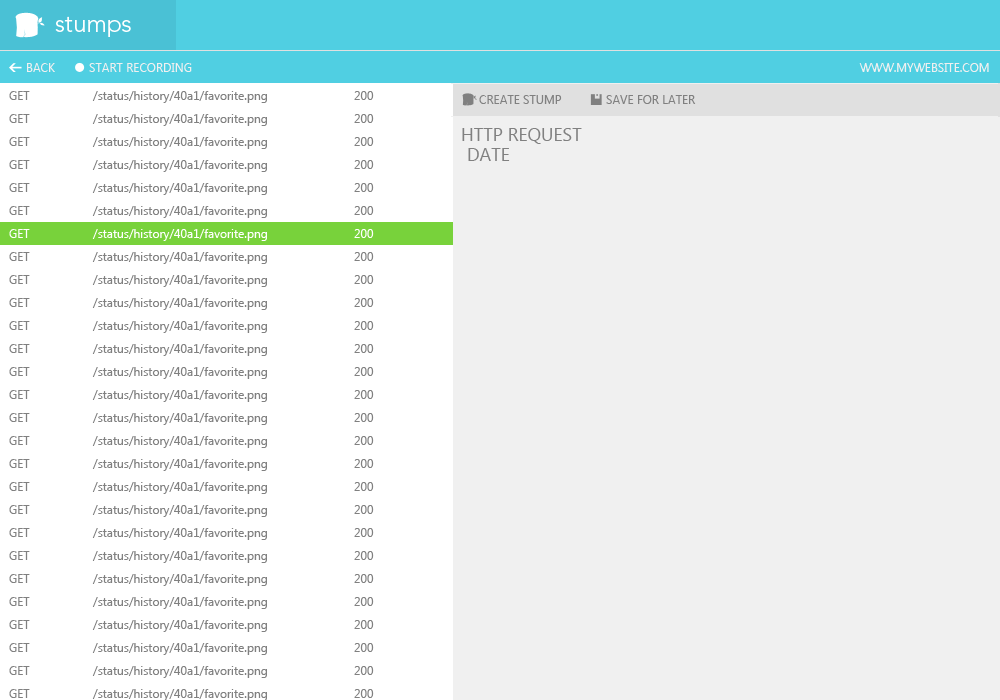
<style>
.page{position:relative;width:1000px;height:700px;background:#f0f0f0}
.page>*{position:absolute;margin:0}
.t1{font:24px "Avenir-Light";color:#ffffff}
.t2{font:12px "SegoeUI";color:#f0f0f0}
.t3{font:12px "SegoeUI";color:#808080}
.t4{font:18px "SegoeUI";color:#808080}
.t5{font:12px "SegoeUI";color:#ffffff}
</style>
<div class="page">
<p class="t1" style="left:55px;top:16px;width:76px;height:21px">stumps</p>
<p class="t2" style="left:27px;top:63px;width:28px;height:9px">BACK</p>
<p class="t2" style="left:89px;top:63px;width:103px;height:9px">START RECORDING</p>
<p class="t2" style="left:859px;top:63px;width:130px;height:9px">WWW.MYWEBSITE.COM</p>
<p class="t3" style="left:9px;top:91px;width:21px;height:9px">GET</p>
<p class="t3" style="left:92px;top:91px;width:175px;height:12px">/status/history/40a1/favorite.png</p>
<p class="t3" style="left:354px;top:91px;width:20px;height:9px">200</p>
<p class="t3" style="left:479px;top:95px;width:83px;height:9px">CREATE STUMP</p>
<p class="t3" style="left:606px;top:95px;width:90px;height:9px">SAVE FOR LATER</p>
<p class="t3" style="left:9px;top:114px;width:21px;height:9px">GET</p>
<p class="t3" style="left:92px;top:114px;width:175px;height:12px">/status/history/40a1/favorite.png</p>
<p class="t3" style="left:354px;top:114px;width:20px;height:9px">200</p>
<p class="t3" style="left:9px;top:137px;width:21px;height:9px">GET</p>
<p class="t3" style="left:92px;top:137px;width:175px;height:12px">/status/history/40a1/favorite.png</p>
<p class="t3" style="left:354px;top:137px;width:20px;height:9px">200</p>
<p class="t4" style="left:462px;top:128px;width:120px;height:16px">HTTP REQUEST</p>
<p class="t4" style="left:468px;top:148px;width:42px;height:13px">DATE</p>
<p class="t3" style="left:9px;top:160px;width:21px;height:9px">GET</p>
<p class="t3" style="left:92px;top:160px;width:175px;height:12px">/status/history/40a1/favorite.png</p>
<p class="t3" style="left:354px;top:160px;width:20px;height:9px">200</p>
<p class="t3" style="left:9px;top:183px;width:21px;height:9px">GET</p>
<p class="t3" style="left:92px;top:183px;width:175px;height:12px">/status/history/40a1/favorite.png</p>
<p class="t3" style="left:354px;top:183px;width:20px;height:9px">200</p>
<p class="t3" style="left:9px;top:206px;width:21px;height:9px">GET</p>
<p class="t3" style="left:92px;top:206px;width:175px;height:12px">/status/history/40a1/favorite.png</p>
<p class="t3" style="left:354px;top:206px;width:20px;height:9px">200</p>
<p class="t5" style="left:9px;top:229px;width:21px;height:9px">GET</p>
<p class="t5" style="left:92px;top:229px;width:175px;height:12px">/status/history/40a1/favorite.png</p>
<p class="t5" style="left:354px;top:229px;width:20px;height:9px">200</p>
<p class="t3" style="left:9px;top:252px;width:21px;height:9px">GET</p>
<p class="t3" style="left:92px;top:252px;width:175px;height:12px">/status/history/40a1/favorite.png</p>
<p class="t3" style="left:354px;top:252px;width:20px;height:9px">200</p>
<p class="t3" style="left:9px;top:275px;width:21px;height:9px">GET</p>
<p class="t3" style="left:92px;top:275px;width:175px;height:12px">/status/history/40a1/favorite.png</p>
<p class="t3" style="left:354px;top:275px;width:20px;height:9px">200</p>
<p class="t3" style="left:9px;top:298px;width:21px;height:9px">GET</p>
<p class="t3" style="left:92px;top:298px;width:175px;height:12px">/status/history/40a1/favorite.png</p>
<p class="t3" style="left:354px;top:298px;width:20px;height:9px">200</p>
<p class="t3" style="left:9px;top:321px;width:21px;height:9px">GET</p>
<p class="t3" style="left:92px;top:321px;width:175px;height:12px">/status/history/40a1/favorite.png</p>
<p class="t3" style="left:354px;top:321px;width:20px;height:9px">200</p>
<p class="t3" style="left:9px;top:344px;width:21px;height:9px">GET</p>
<p class="t3" style="left:92px;top:344px;width:175px;height:12px">/status/history/40a1/favorite.png</p>
<p class="t3" style="left:354px;top:344px;width:20px;height:9px">200</p>
<p class="t3" style="left:9px;top:367px;width:21px;height:9px">GET</p>
<p class="t3" style="left:92px;top:367px;width:175px;height:12px">/status/history/40a1/favorite.png</p>
<p class="t3" style="left:354px;top:367px;width:20px;height:9px">200</p>
<p class="t3" style="left:9px;top:390px;width:21px;height:9px">GET</p>
<p class="t3" style="left:92px;top:390px;width:175px;height:12px">/status/history/40a1/favorite.png</p>
<p class="t3" style="left:354px;top:390px;width:20px;height:9px">200</p>
<p class="t3" style="left:9px;top:413px;width:21px;height:9px">GET</p>
<p class="t3" style="left:92px;top:413px;width:175px;height:12px">/status/history/40a1/favorite.png</p>
<p class="t3" style="left:354px;top:413px;width:20px;height:9px">200</p>
<p class="t3" style="left:9px;top:436px;width:21px;height:9px">GET</p>
<p class="t3" style="left:92px;top:436px;width:175px;height:12px">/status/history/40a1/favorite.png</p>
<p class="t3" style="left:354px;top:436px;width:20px;height:9px">200</p>
<p class="t3" style="left:9px;top:459px;width:21px;height:9px">GET</p>
<p class="t3" style="left:92px;top:459px;width:175px;height:12px">/status/history/40a1/favorite.png</p>
<p class="t3" style="left:354px;top:459px;width:20px;height:9px">200</p>
<p class="t3" style="left:9px;top:482px;width:21px;height:9px">GET</p>
<p class="t3" style="left:92px;top:482px;width:175px;height:12px">/status/history/40a1/favorite.png</p>
<p class="t3" style="left:354px;top:482px;width:20px;height:9px">200</p>
<p class="t3" style="left:9px;top:505px;width:21px;height:9px">GET</p>
<p class="t3" style="left:92px;top:505px;width:175px;height:12px">/status/history/40a1/favorite.png</p>
<p class="t3" style="left:354px;top:505px;width:20px;height:9px">200</p>
<p class="t3" style="left:9px;top:528px;width:21px;height:9px">GET</p>
<p class="t3" style="left:92px;top:528px;width:175px;height:12px">/status/history/40a1/favorite.png</p>
<p class="t3" style="left:354px;top:528px;width:20px;height:9px">200</p>
<p class="t3" style="left:9px;top:551px;width:21px;height:9px">GET</p>
<p class="t3" style="left:92px;top:551px;width:175px;height:12px">/status/history/40a1/favorite.png</p>
<p class="t3" style="left:354px;top:551px;width:20px;height:9px">200</p>
<p class="t3" style="left:9px;top:574px;width:21px;height:9px">GET</p>
<p class="t3" style="left:92px;top:574px;width:175px;height:12px">/status/history/40a1/favorite.png</p>
<p class="t3" style="left:354px;top:574px;width:20px;height:9px">200</p>
<p class="t3" style="left:9px;top:597px;width:21px;height:9px">GET</p>
<p class="t3" style="left:92px;top:597px;width:175px;height:12px">/status/history/40a1/favorite.png</p>
<p class="t3" style="left:354px;top:597px;width:20px;height:9px">200</p>
<p class="t3" style="left:9px;top:620px;width:21px;height:9px">GET</p>
<p class="t3" style="left:92px;top:620px;width:175px;height:12px">/status/history/40a1/favorite.png</p>
<p class="t3" style="left:354px;top:620px;width:20px;height:9px">200</p>
<p class="t3" style="left:9px;top:643px;width:21px;height:9px">GET</p>
<p class="t3" style="left:92px;top:643px;width:175px;height:12px">/status/history/40a1/favorite.png</p>
<p class="t3" style="left:354px;top:643px;width:20px;height:9px">200</p>
<p class="t3" style="left:9px;top:666px;width:21px;height:9px">GET</p>
<p class="t3" style="left:92px;top:666px;width:175px;height:12px">/status/history/40a1/favorite.png</p>
<p class="t3" style="left:354px;top:666px;width:20px;height:9px">200</p>
<p class="t3" style="left:9px;top:689px;width:21px;height:9px">GET</p>
<p class="t3" style="left:92px;top:689px;width:175px;height:12px">/status/history/40a1/favorite.png</p>
<p class="t3" style="left:354px;top:689px;width:20px;height:9px">200</p>
</div>
